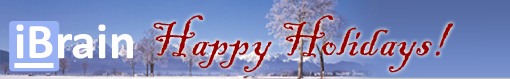
<style>
.page{position:relative;width:510px;height:79px}
.page>*{position:absolute;margin:0}
.t1{font:48px "BlackadderITC-Regular";color:#960000}
.t2{font:50.3px "Calibri-Bold";color:#ffffff}
</style>
<div class="page">
<p class="t1" style="left:153px;top:15px;width:300px;height:58px">Happy Holidays!</p>
<p class="t2" style="left:16px;top:24px;width:117px;height:35px">iBrain</p>
</div>
